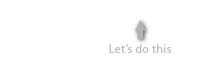
<style>
.page{position:relative;width:200px;height:82px;background:#ffffff}
.page>*{position:absolute;margin:0}
.t1{font:12px "MyriadPro-Regular";letter-spacing:0.025em;color:#bfbfbf}
</style>
<div class="page">
<p class="t1" style="left:109px;top:44px;width:62px;height:9px">Let’s do this</p>
</div>
